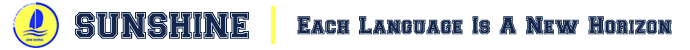
<style>
.page{position:relative;width:690px;height:50px;background:#ffffff}
.page>*{position:absolute;margin:0}
.t1{font:35.9px "CollegiateHeavyOutline-Medium";color:#13274d}
.t2{font:24px "CollegiateHeavyOutline-Medium";color:#13274d}
</style>
<div class="page">
<p class="t1" style="left:75px;top:12px;width:174px;height:27px">SUNSHINE</p>
<p class="t2" style="left:297px;top:16px;width:375px;height:19px">Each Language Is A New Horizon</p>
</div>
